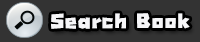
<style>
.page{position:relative;width:200px;height:42px;background:#333333}
.page>*{position:absolute;margin:0}
.t1{font:25.2px "-LayijiTaMaiTine1";color:#f6f6f8}
</style>
<div class="page">
<p class="t1" style="left:51px;top:13px;width:139px;height:16px">Search Book</p>
</div>
